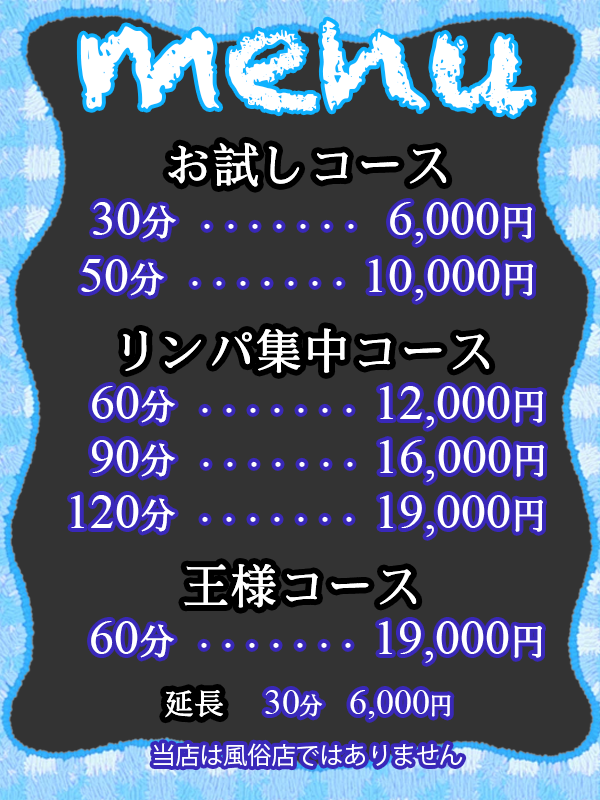
<style>
.page{position:relative;width:600px;height:800px;background:#333333}
.page>*{position:absolute;margin:0}
.t1{font:150px "Chalkduster";color:#ffffff}
.t2{font:48px "SimSong-Bold";color:#ffffff}
.t3{font:24px "SimSong-Bold";color:#ffffff}
.t4{font:50px "SimSong-Bold";color:#ffffff}
.t5{font:50px "TimesNewRomanPSMT";color:#ffffff}
.t6{font:36px "SimSong-Bold";color:#ffffff}
.t7{font:30px "SimSong-Bold";color:#ffffff}
.t8{font:36px "TimesNewRomanPSMT";color:#ffffff}
.t9{font:24px "KozGoPr6N-Regular";color:#ffffff}
</style>
<div class="page">
<p class="t1" style="left:80px;top:20px;width:453px;height:96px">menu</p>
<p class="t2" style="left:168px;top:142px;width:279px;height:45px">お試しコース</p>
<p class="t3" style="left:93px;top:202px;width:439px;height:42px"><span class="t4">    </span><span class="t5">30</span><span class="t6">分 </span>······· <span class="t5">6,000</span><span class="t6">円</span></p>
<p class="t3" style="left:81px;top:259px;width:452px;height:42px"><span class="t4">    </span><span class="t5">50</span><span class="t6">分 </span>······· <span class="t5">10,000</span><span class="t6">円</span></p>
<p class="t2" style="left:123px;top:328px;width:367px;height:45px">リンパ集中コース</p>
<p class="t3" style="left:92px;top:386px;width:451px;height:42px"><span class="t4">    </span><span class="t5">60</span><span class="t6">分 </span>······· <span class="t5">12,000</span><span class="t6">円</span></p>
<p class="t3" style="left:92px;top:440px;width:452px;height:42px"><span class="t4">    </span><span class="t5">90</span><span class="t6">分 </span>······· <span class="t5">16,000</span><span class="t6">円</span></p>
<p class="t3" style="left:71px;top:495px;width:472px;height:42px"><span class="t4">    </span><span class="t5">120</span><span class="t6">分 </span>······· <span class="t5">19,000</span><span class="t6">円</span></p>
<p class="t2" style="left:184px;top:564px;width:233px;height:44px">王様コース</p>
<p class="t3" style="left:91px;top:621px;width:451px;height:42px"><span class="t4">    </span><span class="t5">60</span><span class="t6">分 </span>······· <span class="t5">19,000</span><span class="t6">円</span></p>
<p class="t7" style="left:165px;top:690px;width:58px;height:28px">延長</p>
<p class="t8" style="left:265px;top:690px;width:186px;height:29px"><span class="t4">    </span>30<span class="t3">分 </span>6,000<span class="t3">円</span></p>
<p class="t9" style="left:153px;top:743px;width:310px;height:24px"><span class="t4">    </span>当店は風俗店ではありません</p>
</div>
